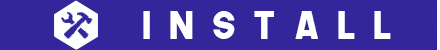
<style>
.page{position:relative;width:440px;height:50px;background:#32269a}
.page>*{position:absolute;margin:0}
.t1{font:37.5px "TheNextFont";letter-spacing:0.48em;color:#ffffff}
</style>
<div class="page">
<p class="t1" style="left:143px;top:11px;width:248px;height:28px">INSTALL</p>
</div>
